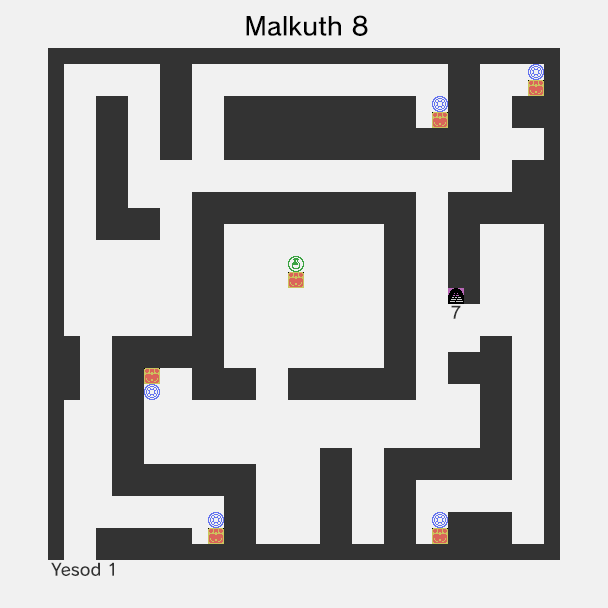
<style>
.page{position:relative;width:608px;height:608px;background:#f1f1f1}
.page>*{position:absolute;margin:0}
.t1{font:25px "nintendoNTLG-DB002";color:#000000}
.t2{font:16.7px "nintendoNTLG-DB002";color:#333333}
</style>
<div class="page">
<p class="t1" style="left:246px;top:15px;width:122px;height:21px">Malkuth 8</p>
<p class="t2" style="left:451px;top:305px;width:10px;height:14px">7</p>
<p class="t2" style="left:51px;top:562px;width:63px;height:14px">Yesod 1</p>
</div>
